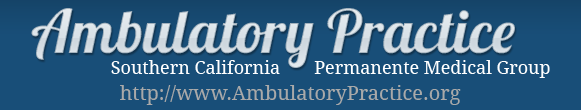
<style>
.page{position:relative;width:581px;height:110px;background:#184e78}
.page>*{position:absolute;margin:0}
.t1{font:60px "Lobster";color:#dadada}
.t2{font:18px "DroidSerif";color:#ffffff}
.t3{font:20px "DroidSerif";color:#a9a9a9}
</style>
<div class="page">
<p class="t1" style="left:31px;top:8px;width:484px;height:60px;opacity:0.92">Ambulatory Practice</p>
<p class="t2" style="left:111px;top:60px;width:169px;height:14px">Southern California</p>
<p class="t2" style="left:314px;top:60px;width:236px;height:18px">Permanente Medical Group</p>
<p class="t3" style="left:120px;top:85px;width:341px;height:20px">http://www.AmbulatoryPractice.org</p>
</div>
